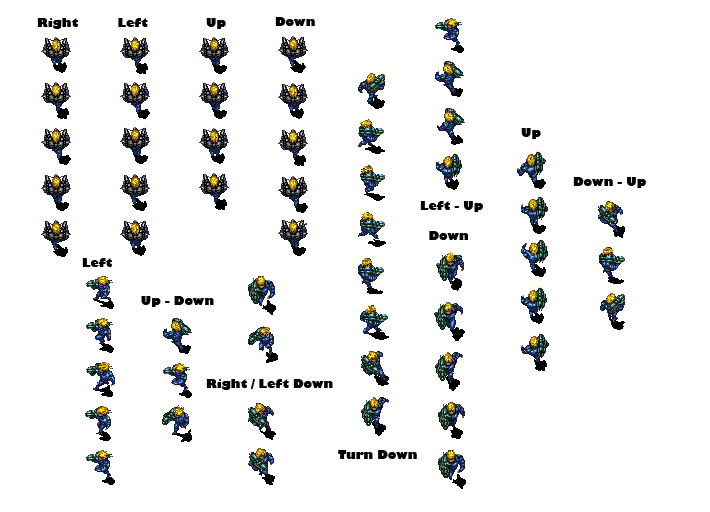
<style>
.page{position:relative;width:710px;height:512px;background:#ffffff}
.page>*{position:absolute;margin:0}
.t1{font:12px "GillSans-UltraBold";color:#020100}
</style>
<div class="page">
<p class="t1" style="left:275px;top:17px;width:40px;height:9px">Down</p>
<p class="t1" style="left:37px;top:18px;width:41px;height:11px">Right</p>
<p class="t1" style="left:118px;top:18px;width:30px;height:9px">Left</p>
<p class="t1" style="left:206px;top:18px;width:20px;height:11px">Up</p>
<p class="t1" style="left:521px;top:128px;width:20px;height:11px">Up</p>
<p class="t1" style="left:573px;top:177px;width:73px;height:11px">Down - Up</p>
<p class="t1" style="left:420px;top:201px;width:63px;height:11px">Left - Up</p>
<p class="t1" style="left:429px;top:231px;width:39px;height:9px">Down</p>
<p class="t1" style="left:82px;top:258px;width:30px;height:9px">Left</p>
<p class="t1" style="left:141px;top:296px;width:73px;height:11px">Up - Down</p>
<p class="t1" style="left:206px;top:379px;width:127px;height:11px">Right / Left Down</p>
<p class="t1" style="left:338px;top:450px;width:79px;height:9px">Turn Down</p>
</div>
